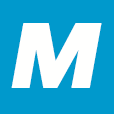
<style>
.page{position:relative;width:114px;height:114px;background:#0099cc}
.page>*{position:absolute;margin:0}
.t1{font:90.3px "AvenirNext-Bold";color:#fffffe;text-transform:uppercase;font-weight:bold;font-style:italic}
</style>
<div class="page">
<p class="t1" style="left:11px;top:23px;width:91px;height:65px">M</p>
</div>
